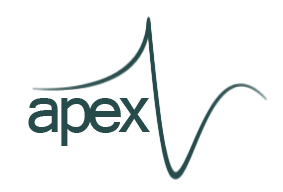
<style>
.page{position:relative;width:283px;height:192px;background:#ffffff}
.page>*{position:absolute;margin:0}
.t1{font:72px "Raavi";letter-spacing:-0.075em;color:#274a4a}
</style>
<div class="page">
<p class="t1" style="left:28px;top:98px;width:122px;height:48px">apex</p>
</div>
